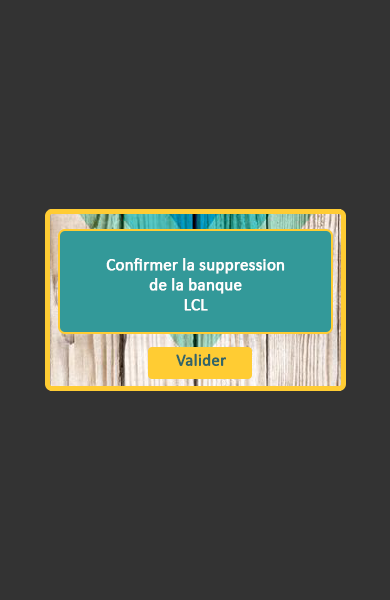
<style>
.page{position:relative;width:390px;height:600px;background:#333333}
.page>*{position:absolute;margin:0}
.t1{font:16.7px "Calibri";color:#ffffff;font-weight:bold}
.t2{font:16.7px "Calibri";color:#336666;font-weight:bold}
</style>
<div class="page">
<p class="t1" style="left:106px;top:258px;width:179px;height:53px;text-align:center">Confirmer la suppression <br>de la banque <br>LCL</p>
<p class="t2" style="left:176px;top:353px;width:50px;height:13px">Valider</p>
</div>
